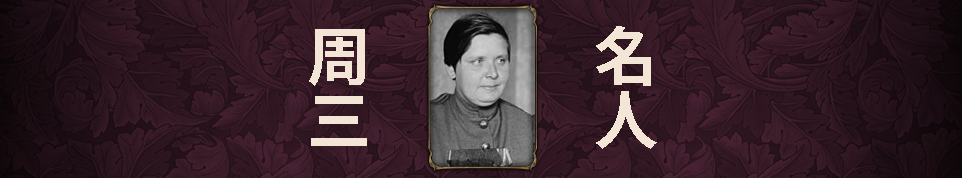
<style>
.page{position:relative;width:962px;height:178px}
.page>*{position:absolute;margin:0}
.t1{font:64px/96px "SpoqaHanSansNeo-Bold";color:#f3e6d6}
</style>
<div class="page">
<p class="t1" style="left:309px;top:29px;width:58px;height:117px">周三</p>
<p class="t1" style="left:596px;top:26px;width:61px;height:123px">名人</p>
</div>
